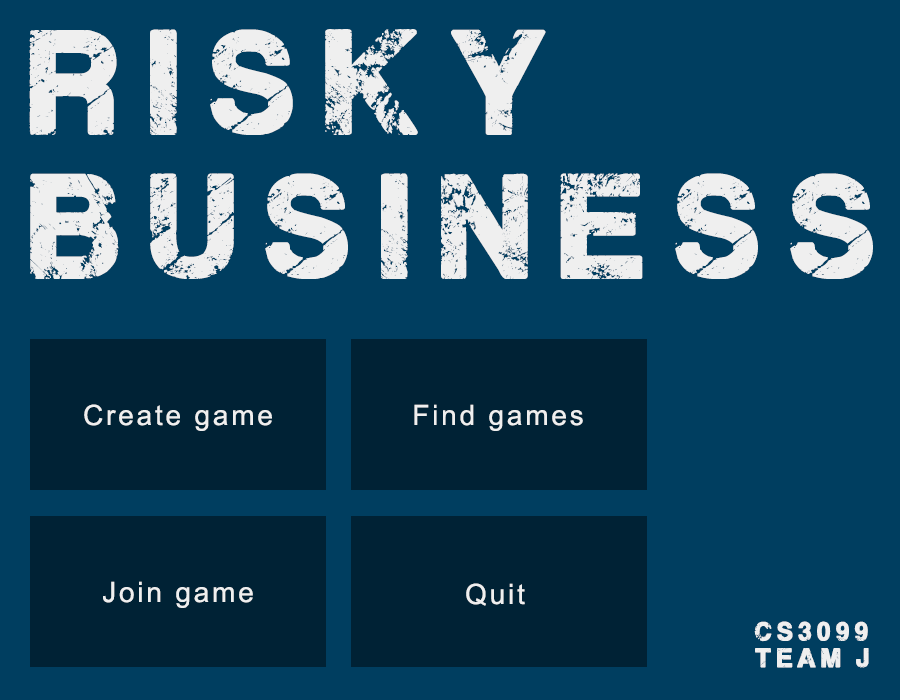
<style>
.page{position:relative;width:900px;height:700px;background:#003e60}
.page>*{position:absolute;margin:0}
.t1{font:120px "PlaneCrash";letter-spacing:0.18em;color:#efefef}
.t2{font:28px "ArialMT";letter-spacing:0.1em;color:#efefef}
.t3{font:22px "PlaneCrash";letter-spacing:0.18em;color:#efefef}
</style>
<div class="page">
<p class="t1" style="left:29px;top:29px;width:844px;height:250px">risky<br>business</p>
<p class="t2" style="left:84px;top:404px;width:188px;height:27px">Create game</p>
<p class="t2" style="left:414px;top:404px;width:169px;height:27px">Find games</p>
<p class="t2" style="left:103px;top:581px;width:150px;height:27px">Join game</p>
<p class="t2" style="left:466px;top:583px;width:59px;height:23px">Quit</p>
<p class="t3" style="left:754px;top:621px;width:115px;height:47px">cs3099<br>team j</p>
</div>
